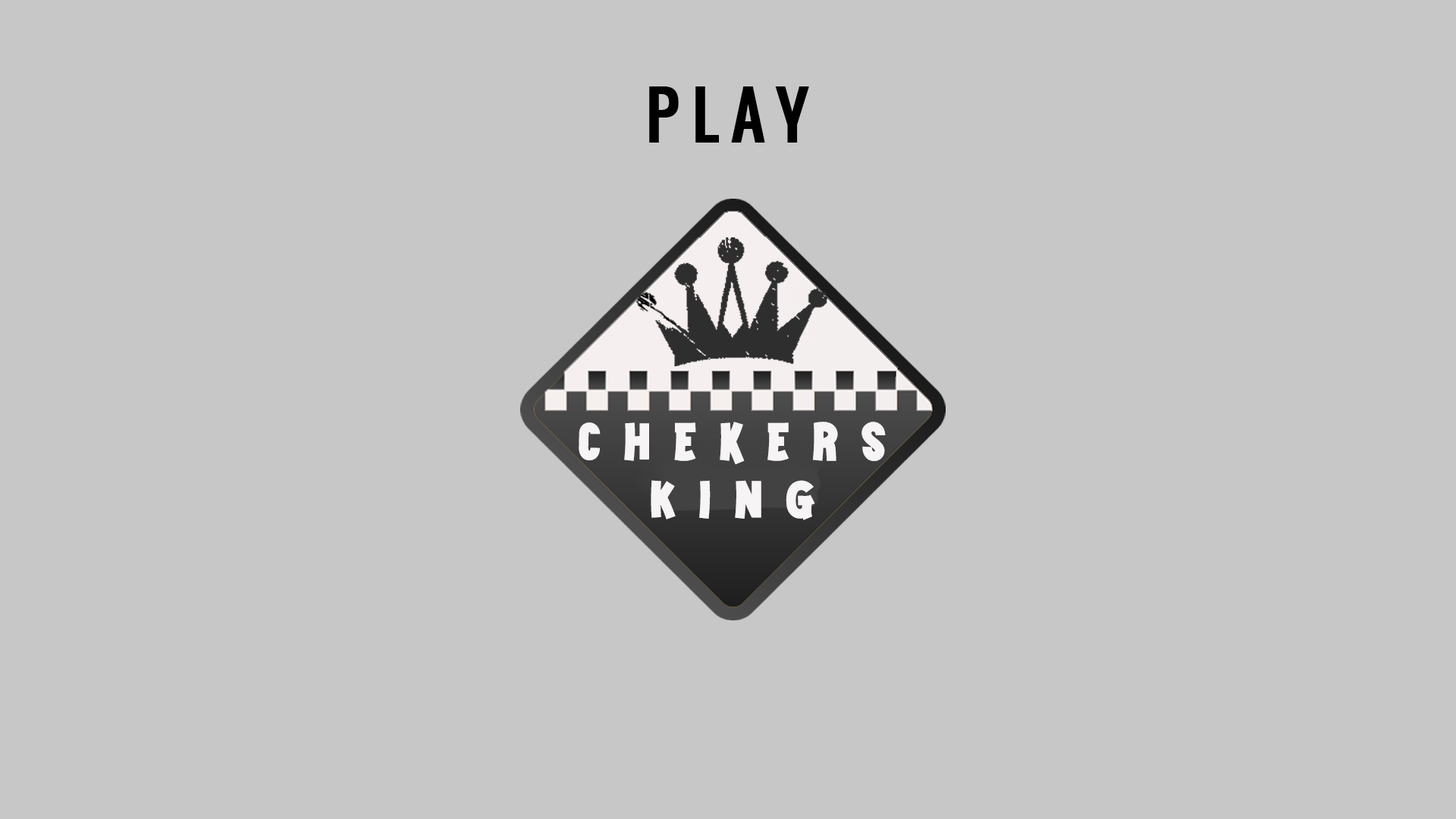
<style>
.page{position:relative;width:1456px;height:819px;background:#c7c7c7}
.page>*{position:absolute;margin:0}
.t1{font:89.6px "Oswald-Regular";letter-spacing:0.2em;color:#000000;font-variant:small-caps;font-weight:bold}
.t2{font:52.3px "GAMKINGPersonalUse";letter-spacing:0.45em;color:#f6f4f4}
</style>
<div class="page">
<p class="t1" style="left:649px;top:86px;width:160px;height:57px">play</p>
<p class="t2" style="left:579px;top:422px;width:307px;height:43px">Chekers</p>
<p class="t2" style="left:651px;top:480px;width:164px;height:40px">King</p>
</div>
